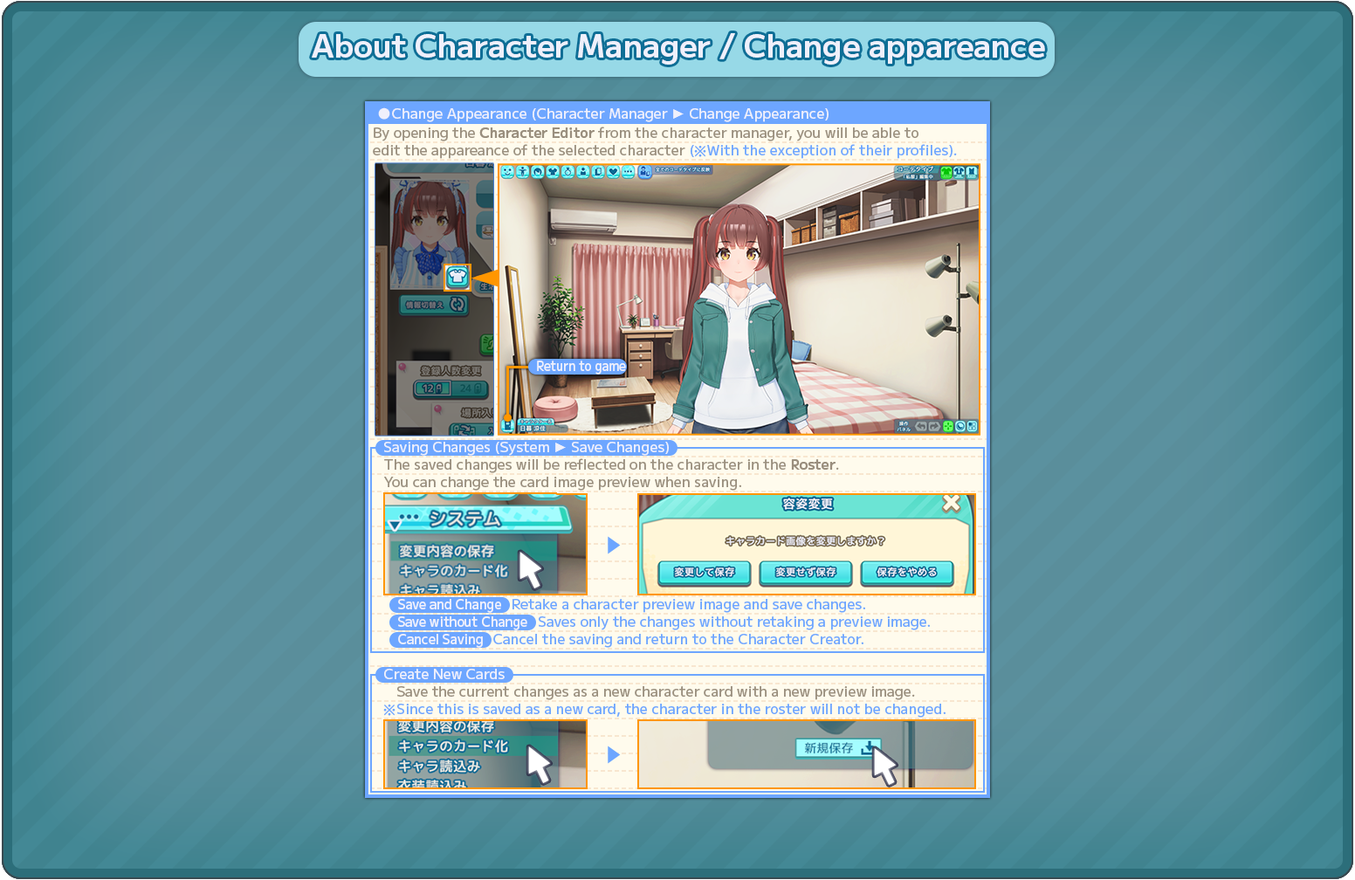
<style>
.page{position:relative;width:1355px;height:880px}
.page>*{position:absolute;margin:0}
.t1{font:31.4px "MPLUS2-SemiBold";color:#eff0fb}
.t2{font:14px "MPLUS2-Medium";color:#eff0fb}
.t3{font:14px "TimesNewRomanPSMT";color:#eff0fb}
.t4{font:10.5px/17.5px "MPLUS2-Medium";color:#9a8f7e}
.t5{font:10.5px/17.5px "MPLUS2-SemiBold";color:#9a8f7e}
.t6{font:10.5px/17.5px "MPLUS2-Medium";color:#6da6ff}
.t7{font:10.5px "MPLUS2-Medium";color:#eff0fb;scale:0.85 1}
.t8{font:14px "MPLUS2-Medium";color:#eff0fb;scale:0.9 1}
.t9{font:14px "MPLUS2-Medium";color:#6da6ff}
.t10{font:14px "MPLUS2-Medium";color:#9a8f7e}
</style>
<div class="page">
<p class="t1" style="left:312px;top:33px;width:733px;height:32px">About Character Manager / Change appareance</p>
<p class="t2" style="left:392px;top:108px;width:437px;height:14px">Change Appearance (Character Manager <span class="t3">► </span>Change Appearance)</p>
<p class="t4" style="left:373px;top:127px;width:584px;height:32px">By opening the <span class="t5">Character Editor</span> from the character manager, you will be able to<br>edit the appareance of the selected character <span class="t6">(   With the exception of their profiles).</span></p>
<p class="t7" style="left:537px;top:361px;width:89px;height:14px">Return to game</p>
<p class="t2" style="left:384px;top:442px;width:285px;height:14px">Saving Changes (System <span class="t3">► </span>Save Changes)</p>
<p class="t4" style="left:384px;top:458px;width:455px;height:33px">The saved changes will be reflected on the character in the <span class="t5">Roster</span>.<br>You can change the card image preview when saving.</p>
<p class="t8" style="left:398px;top:599px;width:103px;height:14px">Save and Change</p>
<p class="t9" style="left:512px;top:599px;width:353px;height:14px">Retake a character preview image and save changes.</p>
<p class="t8" style="left:398px;top:616px;width:129px;height:14px">Save without Change</p>
<p class="t9" style="left:539px;top:616px;width:391px;height:14px">Saves only the changes without retaking a preview image.</p>
<p class="t8" style="left:398px;top:634px;width:85px;height:14px">Cancel Saving</p>
<p class="t9" style="left:493px;top:634px;width:370px;height:14px">Cancel the saving and return to the Character Creator.</p>
<p class="t2" style="left:384px;top:669px;width:121px;height:10px">Create New Cards</p>
<p class="t10" style="left:397px;top:686px;width:518px;height:14px">Save the current changes as a new character card with a new preview image.</p>
<p class="t9" style="left:397px;top:704px;width:549px;height:14px">Since this is saved as a new card, the character in the roster will not be changed.</p>
</div>
